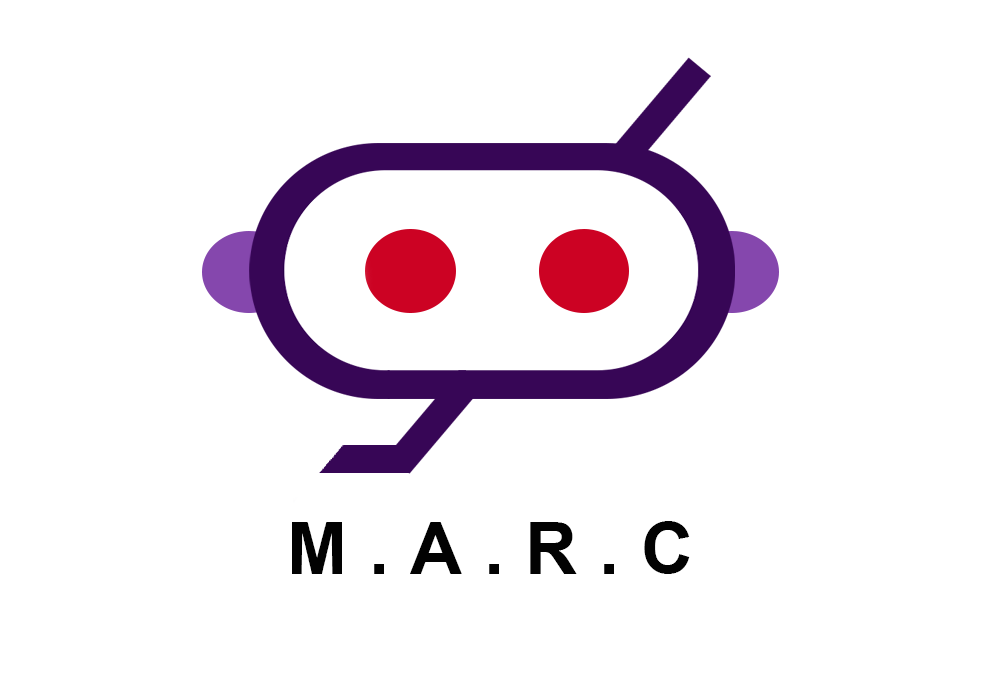
<style>
.page{position:relative;width:1000px;height:700px;background:#ffffff}
.page>*{position:absolute;margin:0}
.t1{font:72px "Arial-BoldMT";letter-spacing:0.3em;color:#020202}
</style>
<div class="page">
<p class="t1" style="left:292px;top:521px;width:398px;height:53px">M.A.R.C</p>
</div>
